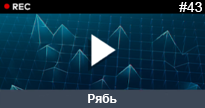
<style>
.page{position:relative;width:205px;height:108px}
.page>*{position:absolute;margin:0}
.t1{font:14px "ArialMT";color:#ffffff}
.t2{font:12px "Arial-BoldMT";color:#ffffff}
</style>
<div class="page">
<p class="t1" style="left:179px;top:2px;width:23px;height:10px">#43</p>
<p class="t2" style="left:88px;top:94px;width:29px;height:9px">Рябь</p>
</div>
